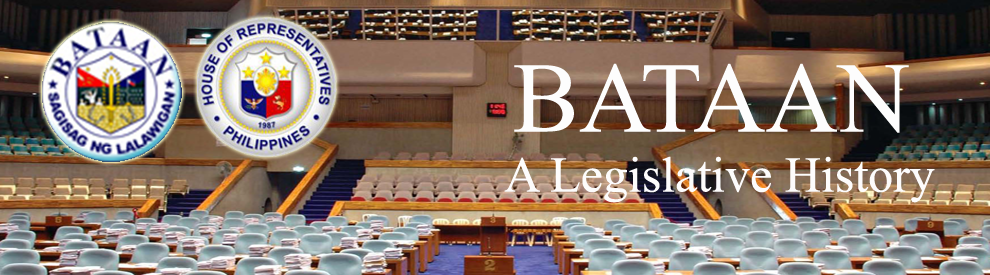
<style>
.page{position:relative;width:990px;height:275px}
.page>*{position:absolute;margin:0}
.t1{font:50px "TimesNewRomanPSMT";color:#fdfcfc}
.t2{font:100px "TimesNewRomanPSMT";color:#fdfdfd}
</style>
<div class="page">
<p class="t1" style="left:504px;top:63px;width:431px;height:140px;text-align:center"><span class="t2">BATAAN<br></span>A Legislative History</p>
</div>
